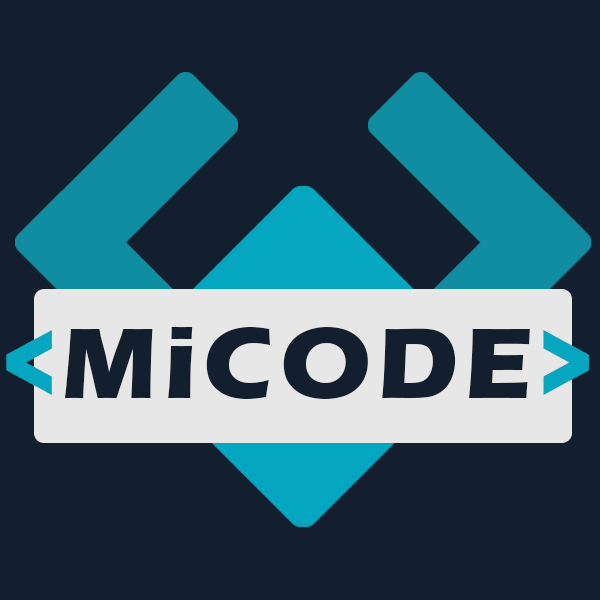
<style>
.page{position:relative;width:600px;height:600px;background:#131f2e}
.page>*{position:absolute;margin:0}
.t1{font:104.3px "ErasITC-Bold";letter-spacing:0.06em;color:#131f2e}
.t2{font:104.3px "ErasITC-Bold";letter-spacing:0.06em;color:#04a7bf}
</style>
<div class="page">
<p class="t1" style="left:6px;top:327px;width:583px;height:72px"><span class="t2">&lt;</span>MiCODE<span class="t2">&gt;</span></p>
</div>
